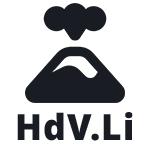
<style>
.page{position:relative;width:150px;height:150px;background:#ffffff}
.page>*{position:absolute;margin:0}
.t1{font:36px "NotoSans-Black";letter-spacing:0.025em;color:#1a1c23;text-transform:uppercase}
.t2{font:36px "NotoSans-Black";letter-spacing:0.025em;color:#1a1c23}
</style>
<div class="page">
<p class="t1" style="left:17px;top:112px;width:116px;height:29px">H<span class="t2">d</span>V.L<span class="t2">i</span></p>
</div>
